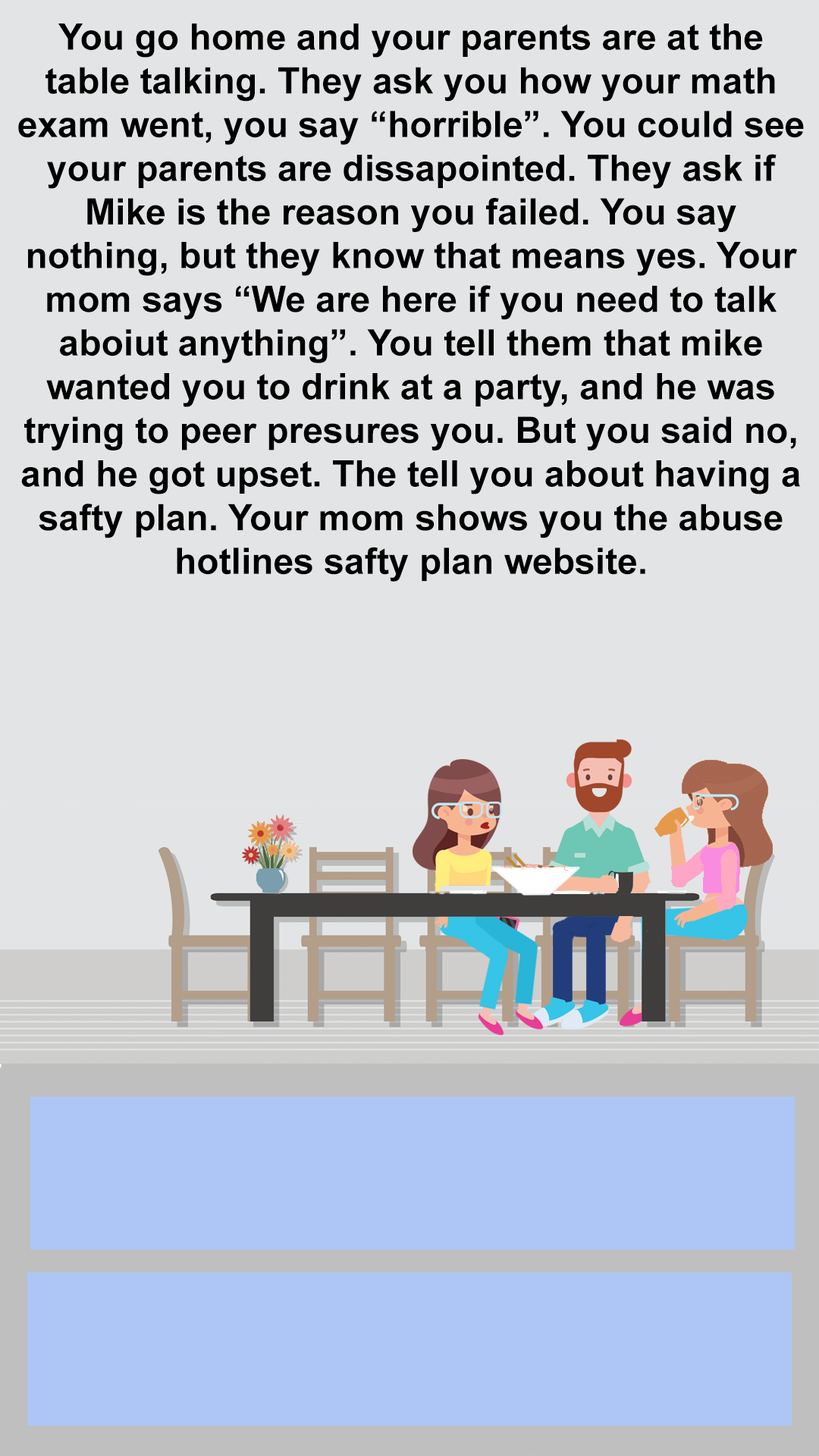
<style>
.page{position:relative;width:819px;height:1456px;background:#e3e4e5}
.page>*{position:absolute;margin:0}
.t1{font:36.4px "Arial-BoldMT";color:#000000}
</style>
<div class="page">
<p class="t1" style="left:18px;top:24px;width:786px;height:558px;text-align:center">You go home and your parents are at the table talking. They ask you how your math exam went, you say “horrible”. You could see your parents are dissapointed. They ask if Mike is the reason you failed. You say     nothing, but they know that means yes. Your mom says “We are here if you need to talk aboiut anything”. You tell them that mike wanted you to drink at a party, and he was trying to peer presures you. But you said no, and he got upset. The tell you about having a safty plan. Your mom shows you the abuse hotlines safty plan website.</p>
</div>
